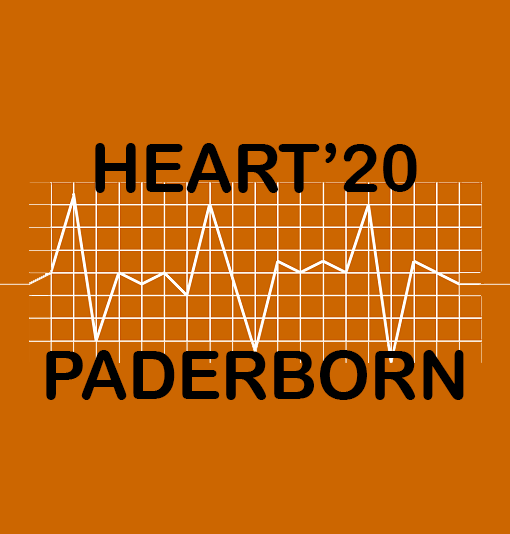
<style>
.page{position:relative;width:510px;height:534px;background:#cc6600}
.page>*{position:absolute;margin:0}
.t1{font:66.7px "ArialRoundedMTBold";color:#000000}
.t2{font:66.7px "ArialRoundedMTBold";color:#000000;font-variant:small-caps}
</style>
<div class="page">
<p class="t1" style="left:95px;top:143px;width:322px;height:50px">HEART’20</p>
<p class="t2" style="left:46px;top:350px;width:418px;height:50px">PADERBORN</p>
</div>
